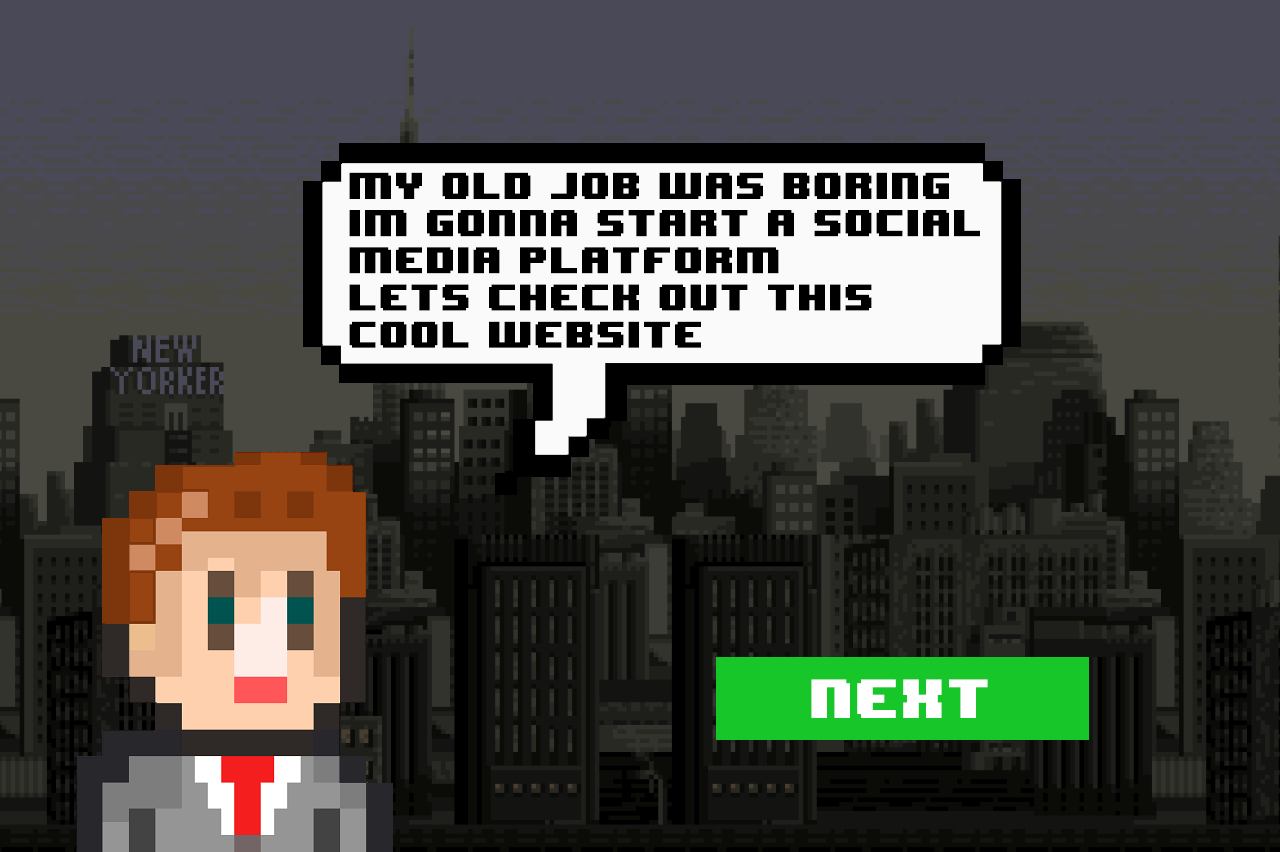
<style>
.page{position:relative;width:1280px;height:852px}
.page>*{position:absolute;margin:0}
.t1{font:31px "8BITWONDERNominal";color:#000000}
.t2{font:45.9px "8BITWONDERNominal";color:#ffffff}
</style>
<div class="page">
<p class="t1" style="left:349px;top:172px;width:631px;height:176px">My old job was boring<br>im gonna start a social <br>media platform<br>Lets check out this <br>cool website</p>
<p class="t2" style="left:811px;top:679px;width:177px;height:39px">Next</p>
</div>
